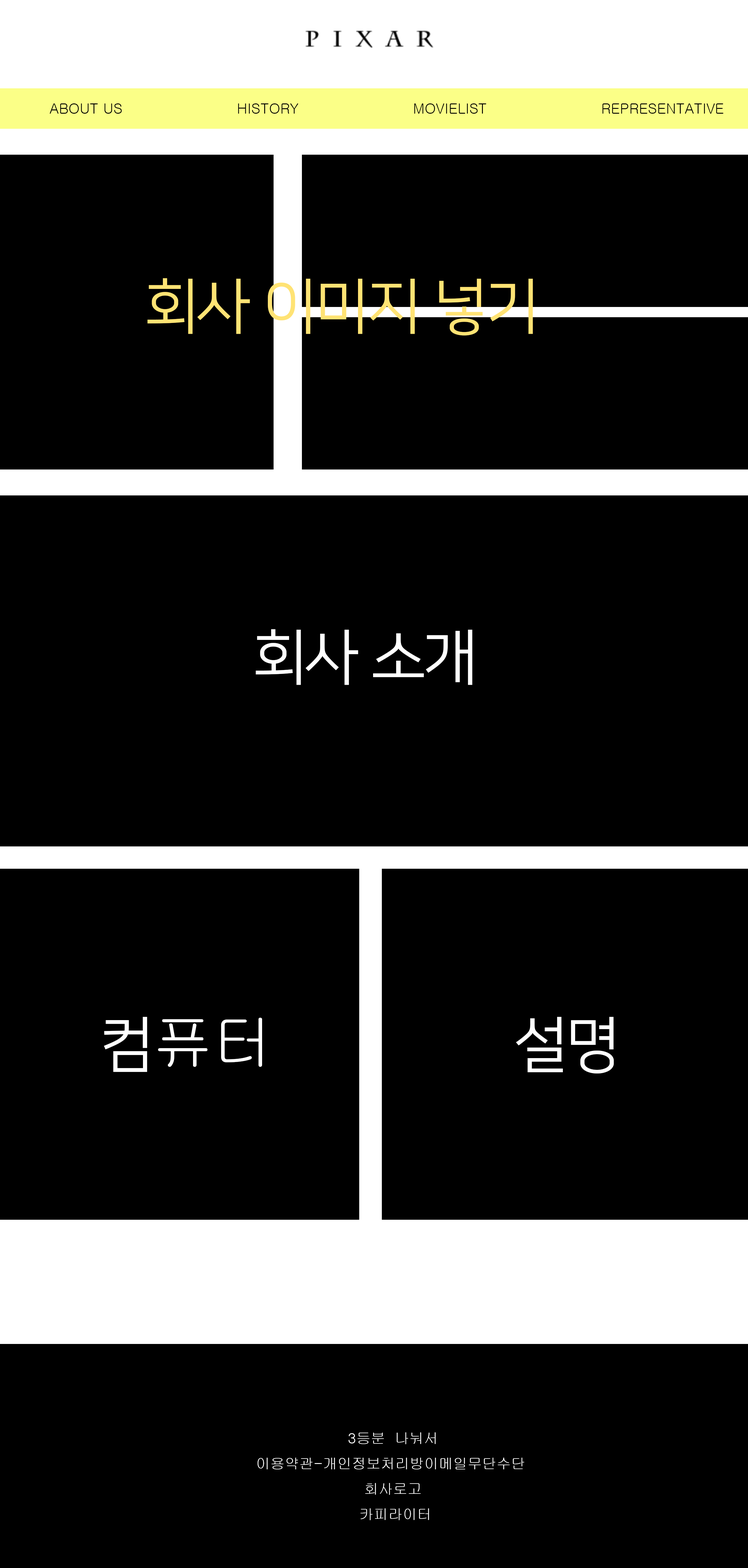
<style>
.page{position:relative;width:748px;height:1568px;background:#000000}
.page>*{position:absolute;margin:0}
.t1{font:14.5px "Gulim";color:#000000;text-transform:uppercase}
.t2{font:14.5px "Gulim";color:#000000}
.t3{font:60.3px "NanumSquare_acR";color:#ffe374;text-transform:uppercase}
.t4{font:60.3px "NanumSquare_acR";color:#ffffff;text-transform:uppercase}
.t5{font:60.3px "Gulim";color:#ffffff;text-transform:uppercase}
.t6{font:14.5px "Gulim";color:#ffffff;text-transform:uppercase}
</style>
<div class="page">
<p class="t1" style="left:50px;top:103px;width:72px;height:11px"><span class="t2">AB</span>out us</p>
<p class="t2" style="left:238px;top:103px;width:60px;height:11px">HISTORY</p>
<p class="t2" style="left:414px;top:103px;width:72px;height:11px">MOVIELIST</p>
<p class="t1" style="left:602px;top:103px;width:121px;height:11px">representative</p>
<p class="t3" style="left:147px;top:278px;width:386px;height:58px">회사 이미지 넣기</p>
<p class="t4" style="left:256px;top:629px;width:216px;height:56px">회사 소개</p>
<p class="t5" style="left:104px;top:1017px;width:158px;height:55px"><span class="t4">컴</span>퓨터</p>
<p class="t4" style="left:516px;top:1017px;width:98px;height:56px">설명</p>
<p class="t6" style="left:258px;top:1432px;width:266px;height:88px;text-align:center">3등분  나눠서 <br>이용약관-개인정보처리방이메일무단수단  <br>회사로고 <br>카피라이터</p>
</div>
